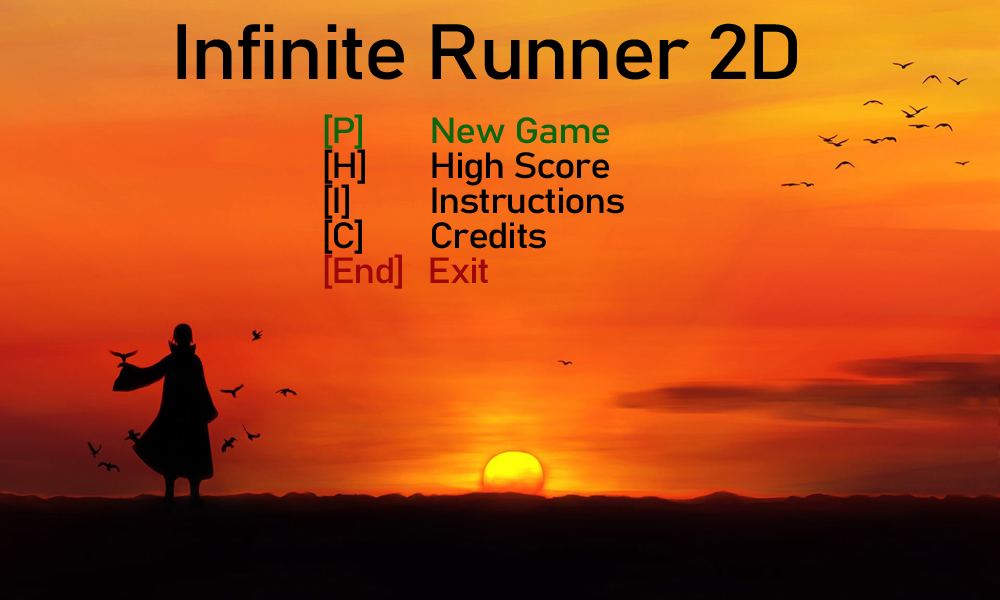
<style>
.page{position:relative;width:1000px;height:600px}
.page>*{position:absolute;margin:0}
.t1{font:76.9px "Bahnschrift";letter-spacing:-0.04em;color:#000000;scale:1.11 1}
.t2{font:35.9px "Bahnschrift";letter-spacing:-0.04em;color:#000000;scale:1.11 1}
.t3{font:35.9px "Bahnschrift";letter-spacing:-0.04em;color:#0a670c;scale:1.11 1}
.t4{font:35.9px "Bahnschrift";letter-spacing:-0.04em;color:#9c0808;scale:1.11 1}
</style>
<div class="page">
<p class="t1" style="left:177px;top:23px;width:620px;height:57px">Infinite Runner 2D</p>
<p class="t2" style="left:324px;top:114px;width:300px;height:175px"><span class="t3">[P]   New Game<br></span>[H]   High Score<br>[I]    Instructions<br>[C]   Credits<br><span class="t4">[End] Exit</span></p>
</div>
